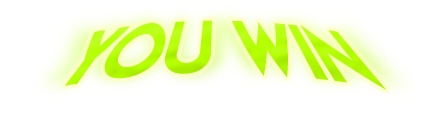
<style>
.page{position:relative;width:448px;height:124px;background:#ffffff}
.page>*{position:absolute;margin:0}
.t1{font:75px "LemonMilk";color:#b4ff00;scale:1.05 1}
</style>
<div class="page">
<p class="t1" style="left:65px;top:20px;width:321px;height:70px">You Win</p>
</div>
